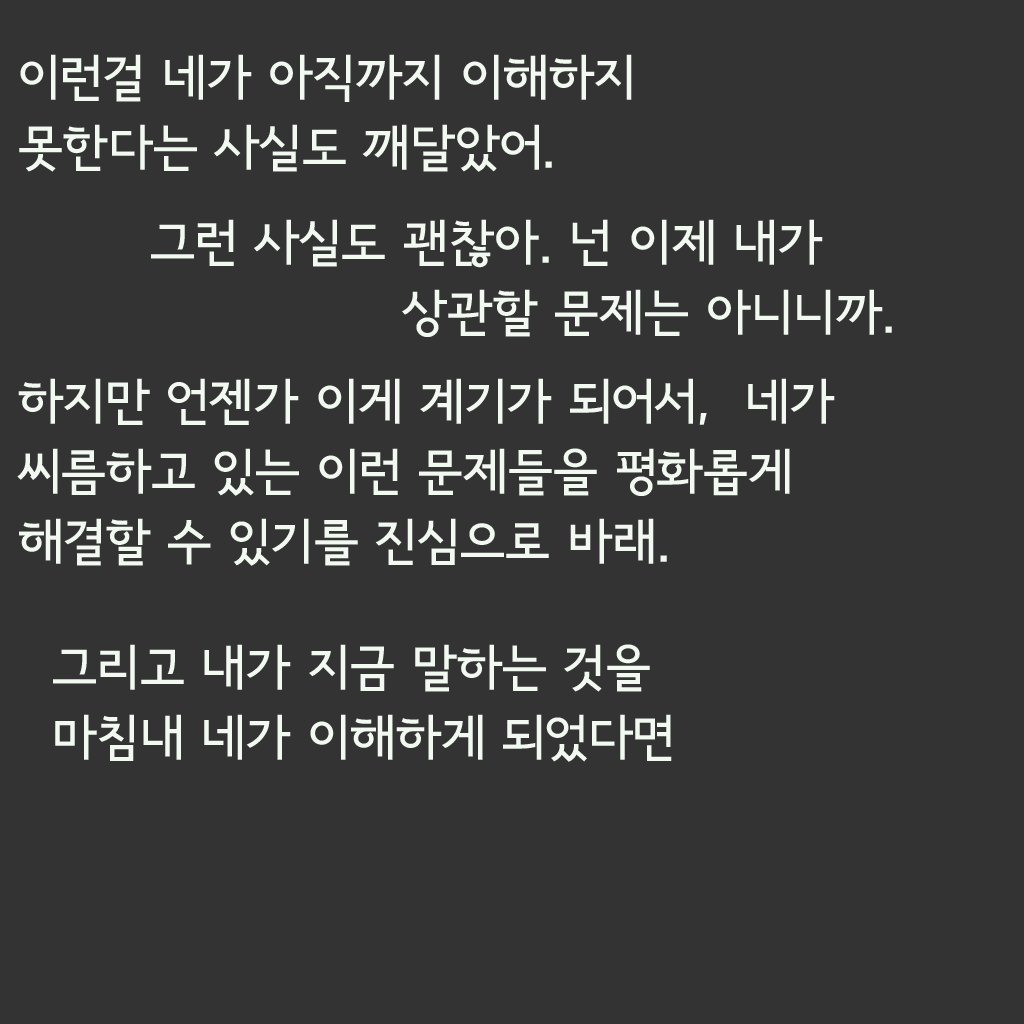
<style>
.page{position:relative;width:1024px;height:1024px;background:#333333}
.page>*{position:absolute;margin:0}
.t1{font:50px/70px "SeoulNamsanB";color:#f1f9f1}
</style>
<div class="page">
<p class="t1" style="left:19px;top:54px;width:613px;height:118px">이런걸 네가 아직까지 이해하지<br>못한다는 사실도 깨달았어.</p>
<p class="t1" style="left:151px;top:219px;width:741px;height:118px">그런 사실도 괜찮아. 넌 이제 내가<br>       상관할 문제는 아니니까.</p>
<p class="t1" style="left:17px;top:378px;width:818px;height:188px">하지만 언젠가 이게 계기가 되어서,  네가 씨름하고 있는 이런 문제들을 평화롭게<br>해결할 수 있기를 진심으로 바래.</p>
<p class="t1" style="left:53px;top:644px;width:619px;height:118px">그리고 내가 지금 말하는 것을<br>마침내 네가 이해하게 되었다면</p>
</div>
